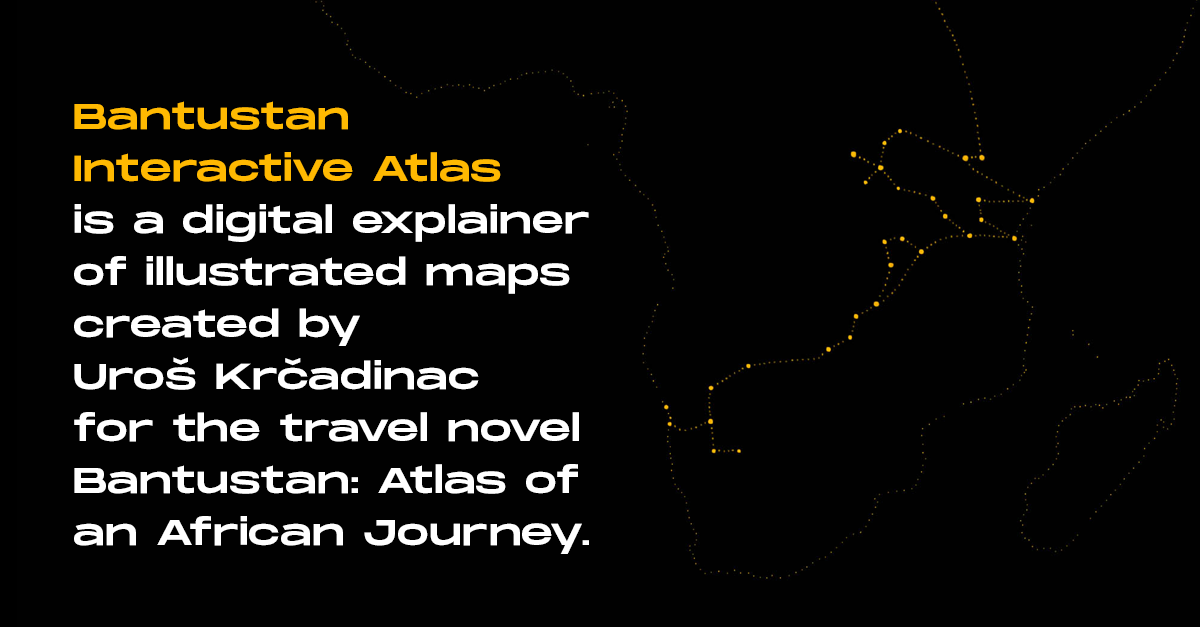
<style>
.page{position:relative;width:1200px;height:627px;background:#010101}
.page>*{position:absolute;margin:0}
.t1{font:36px/52px "MonumentExtended-Regular";letter-spacing:0.025em;color:#ffffff}
.t2{font:36px/52px "MonumentExtended-Regular";letter-spacing:0.025em;color:#ffb901}
</style>
<div class="page">
<p class="t1" style="left:74px;top:101px;width:515px;height:453px"><span class="t2">Bantustan Interactive Atlas<br></span>is a digital explainer of illustrated maps created by <br>Uroš Krčadinac <br>for the travel novel Bantustan: Atlas of an African Journey.</p>
</div>
